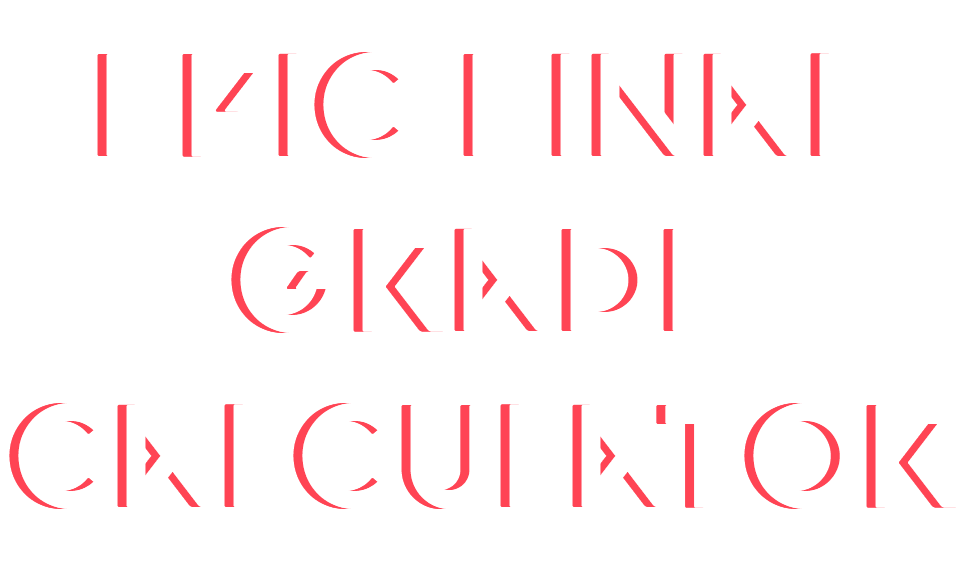
<style>
.page{position:relative;width:960px;height:579px;background:#ffffff}
.page>*{position:absolute;margin:0}
.t1{font:146px "VALORANT-Regular"}
</style>
<div class="page">
<p class="t1" style="left:9px;top:52px;width:948px;height:457px;text-align:center">epic final grade calculator</p>
</div>
